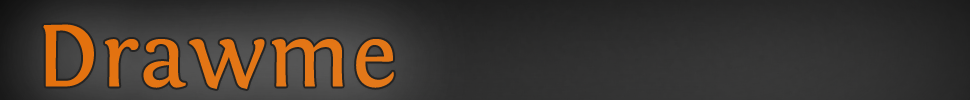
<style>
.page{position:relative;width:970px;height:100px}
.page>*{position:absolute;margin:0}
.t1{font:92px "Fontin-Regular";color:#e37514;font-weight:bold}
</style>
<div class="page">
<p class="t1" style="left:43px;top:24px;width:351px;height:65px">Drawme</p>
</div>
